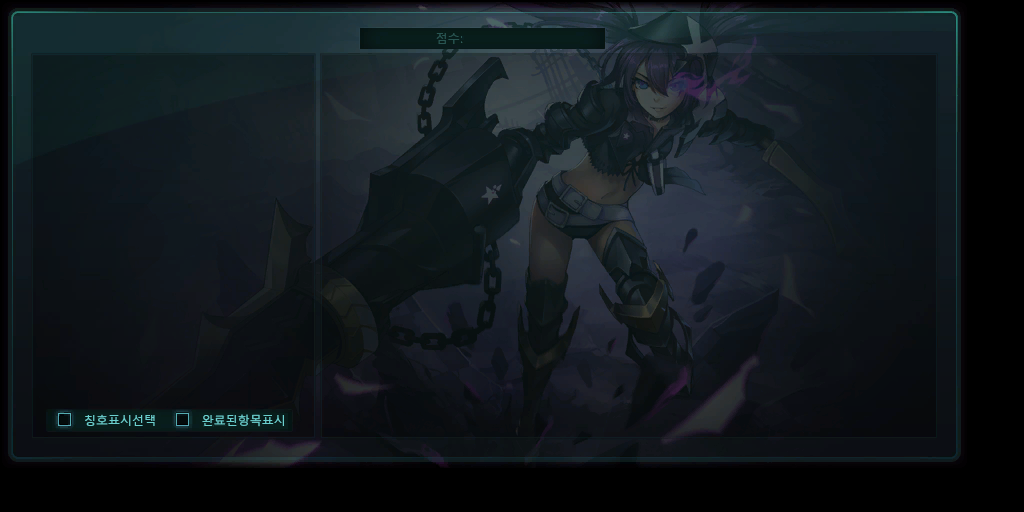
<style>
.page{position:relative;width:1024px;height:512px}
.page>*{position:absolute;margin:0}
.t1{font:12px "MalgunGothicRegular";color:#295552}
.t2{font:12px "MalgunGothicRegular";color:#6bcfce}
</style>
<div class="page">
<p class="t1" style="left:436px;top:33px;width:24px;height:11px">점수</p>
<p class="t2" style="left:85px;top:414px;width:70px;height:12px">칭호표시선택</p>
<p class="t2" style="left:202px;top:414px;width:82px;height:13px">완료된항목표시</p>
</div>
